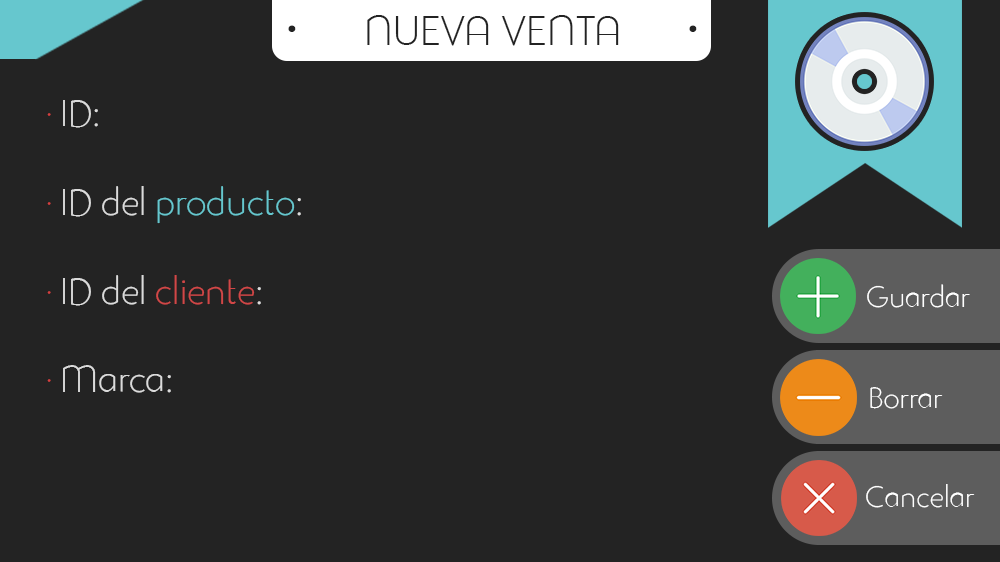
<style>
.page{position:relative;width:1000px;height:562px;background:#232323}
.page>*{position:absolute;margin:0}
.t1{font:41px "StudioGothicAlternateTrial-Extr";color:#232323}
.t2{font:97px "StudioGothicAlternateTrial-Extr";color:#232323}
.t3{font:37px "StudioGothicAlternateTrial-Extr";color:#66c7ce}
.t4{font:37px "StudioGothicAlternateTrial-Extr";color:#d63f3f}
.t5{font:37px "StudioGothicAlternateTrial-Extr";color:#dbdbdb}
.t6{font:37px "StudioGothicAlternateTrial-Extr";color:#d14747}
.t7{font:29px "StudioGothicAlternateTrial-Extr";color:#ffffff}
</style>
<div class="page">
<p class="t1" style="left:367px;top:15px;width:252px;height:31px">NUEVA VENTA</p>
<p class="t2" style="left:288px;top:25px;width:409px;height:7px">·                 ·</p>
<p class="t3" style="left:47px;top:100px;width:254px;height:293px"><span class="t4">· </span><span class="t5">ID:<br></span><span class="t4"><br>· </span><span class="t5">ID del </span>producto<span class="t5">:<br><br></span><span class="t4">· </span><span class="t5">ID del </span><span class="t6">cliente</span><span class="t5">:<br><br></span><span class="t4">· </span><span class="t5">Marca:</span></p>
<p class="t7" style="left:867px;top:284px;width:103px;height:24px">Guardar</p>
<p class="t7" style="left:870px;top:387px;width:73px;height:22px">Borrar</p>
<p class="t7" style="left:866px;top:484px;width:109px;height:24px">Cancelar</p>
</div>
